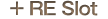
<style>
.page{position:relative;width:108px;height:19px;background:#ffffff}
.page>*{position:absolute;margin:0}
.t1{font:18px "GothicMB101Pro-DeBold";letter-spacing:-0.04em}
</style>
<div class="page">
<p class="t1" style="left:10px;top:0px;width:88px;height:16px">+ RE Slot</p>
</div>
